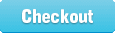
<style>
.page{position:relative;width:115px;height:33px}
.page>*{position:absolute;margin:0}
.t1{font:24px "Ketchupa-Regular";color:#ffffff}
</style>
<div class="page">
<p class="t1" style="left:22px;top:9px;width:71px;height:14px">Checkout</p>
</div>
